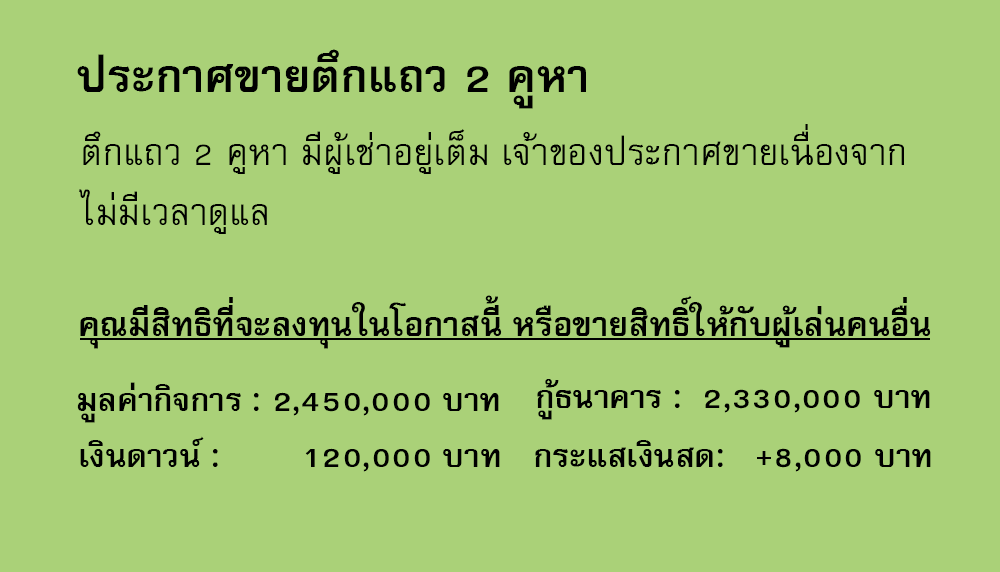
<style>
.page{position:relative;width:1000px;height:572px;background:#aad178}
.page>*{position:absolute;margin:0}
.t1{font:64px "FreesiaUPCBold";color:#000000}
.t2{font:51px/60px "FreesiaUPC";color:#000000}
.t3{font:47px "FreesiaUPCBold";color:#000000}
.t4{font:45px "FreesiaUPCBold";color:#000000}
</style>
<div class="page">
<p class="t1" style="left:77px;top:49px;width:509px;height:60px">ประกาศขายตึกแถว 2 คูหา</p>
<p class="t2" style="left:79px;top:124px;width:825px;height:110px">ตึกแถว 2 คูหา มีผู้เช่าอยู่เต็ม เจ้าของประกาศขายเนื่องจาก<br>ไม่มีเวลาดูแล</p>
<p class="t3" style="left:80px;top:295px;width:851px;height:54px">คุณมีสิทธิที่จะลงทุนในโอกาสนี้ หรือขายสิทธิ์ให้กับผู้เล่นคนอื่น</p>
<p class="t4" style="left:77px;top:382px;width:422px;height:41px">มูลค่ากิจการ : 2,450,000 บาท</p>
<p class="t4" style="left:537px;top:379px;width:393px;height:41px">กู้ธนาคาร :  2,330,000 บาท</p>
<p class="t4" style="left:80px;top:436px;width:420px;height:36px">เงินดาวน์ :        120,000 บาท</p>
<p class="t4" style="left:535px;top:440px;width:396px;height:32px">กระแสเงินสด:   +8,000 บาท</p>
</div>
